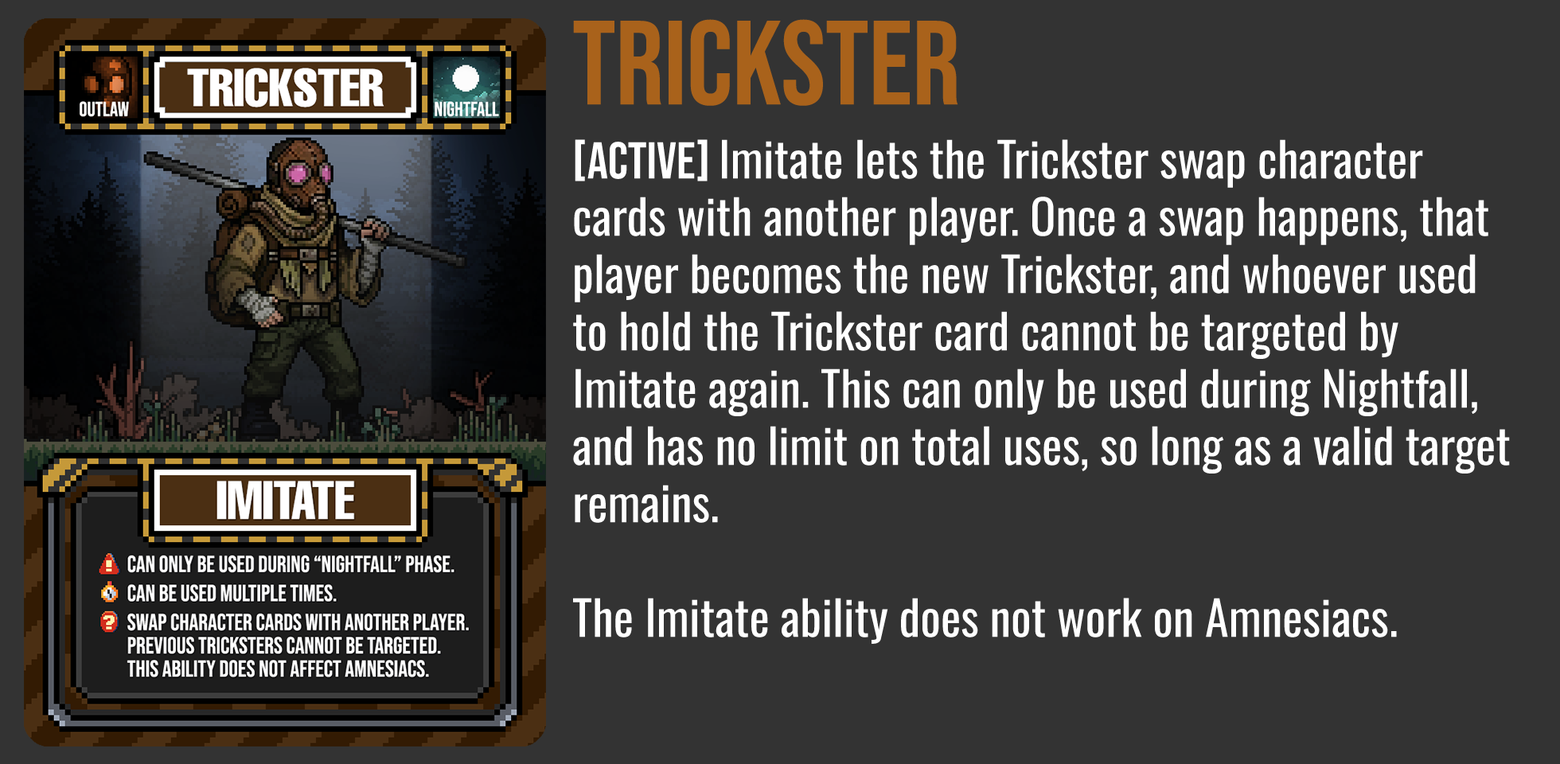
<style>
.page{position:relative;width:1560px;height:764px;background:#333333}
.page>*{position:absolute;margin:0}
.t1{font:119.4px "BebasNeue-Regular";color:#a9621b}
.t2{font:47.8px "Oswald-Regular";color:#ffffff}
.t3{font:51.7px "BebasNeue-Regular";color:#ffffff}
</style>
<div class="page">
<p class="t1" style="left:573px;top:19px;width:385px;height:87px">TRICKSTER</p>
<p class="t2" style="left:573px;top:139px;width:937px;height:505px"><span class="t3">[active] </span>Imitate lets the Trickster swap character cards with another player. Once a swap happens, that player becomes the new Trickster, and whoever used to hold the Trickster card cannot be targeted by Imitate again. This can only be used during Nightfall, and has no limit on total uses, so long as a valid target remains.<br><br>The Imitate ability does not work on Amnesiacs.</p>
</div>
